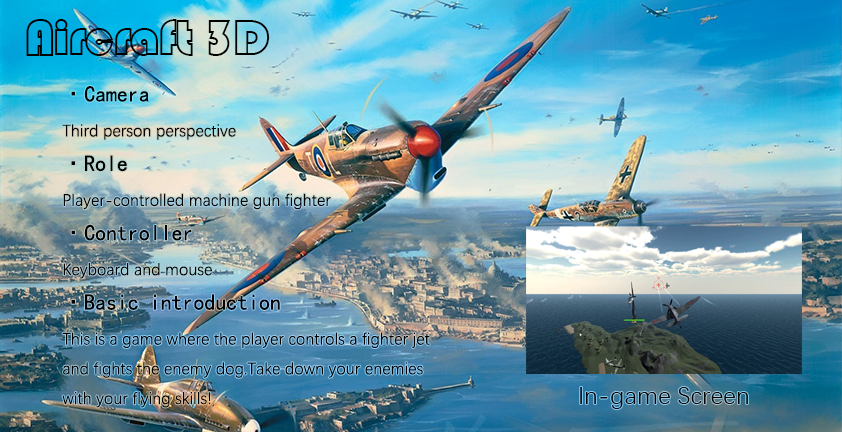
<style>
.page{position:relative;width:842px;height:432px}
.page>*{position:absolute;margin:0}
.t1{font:12px "STCaiyun";color:#000000}
.t2{font:17px "DengXian";color:#000000;scale:0.96 1}
.t3{font:22.7px "SimHei";color:#000000;scale:0.96 1}
.t4{font:25px "DengXian";color:#000000}
</style>
<div class="page">
<p class="t1" style="left:26px;top:19px;width:244px;height:37px">Aircraft 3D</p>
<p class="t2" style="left:62px;top:86px;width:368px;height:322px"><span class="t3">·Camera<br></span>Third person perspective<br><span class="t3">·Role<br></span>Player-controlled machine gun fighter<br><span class="t3">·Controller<br></span>Keyboard and mouse<br><span class="t3">·Basic introduction<br></span>This is a game where the player controls a fighter jet <br>and fights the enemy dog.Take down your enemies <br>with your flying skills!</p>
<p class="t4" style="left:580px;top:387px;width:168px;height:22px">In-game Screen</p>
</div>
